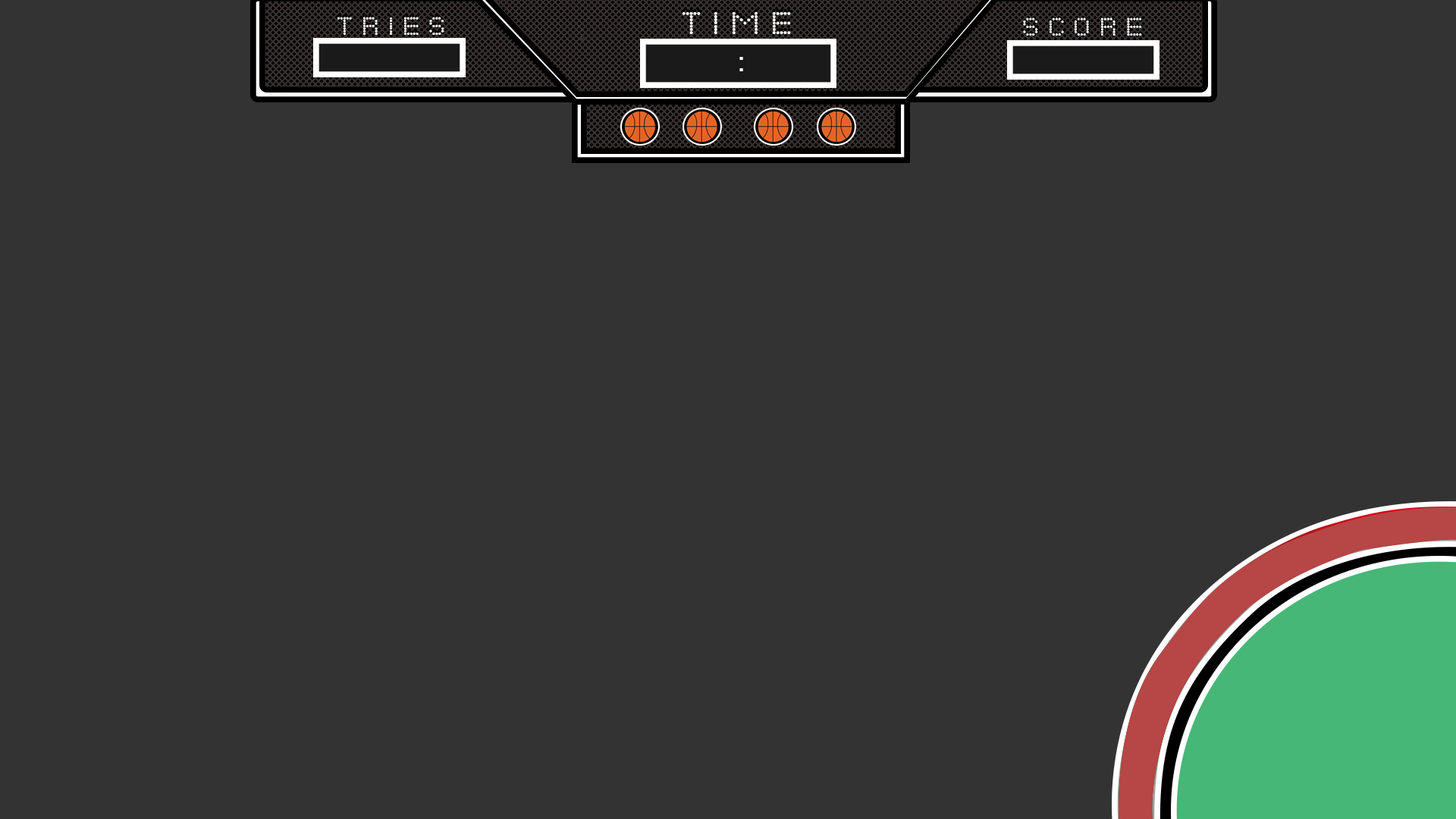
<style>
.page{position:relative;width:1456px;height:819px;background:#333333}
.page>*{position:absolute;margin:0}
.t1{font:22.7px "DotsAllForNowJL";color:#ffffff}
.t2{font:28.2px "DotsAllForNowJL"}
.t3{font:28.2px "DotsAllForNowJL";color:#ffffff}
.t4{font:28.2px "ArialNova";color:#ffffff}
</style>
<div class="page">
<p class="t1" style="left:337px;top:17px;width:107px;height:18px">T R I E S</p>
<p class="t2" style="left:682px;top:8px;width:109px;height:23px">T I M E</p>
<p class="t3" style="left:682px;top:11px;width:109px;height:23px">T I M E</p>
<p class="t1" style="left:1023px;top:17px;width:119px;height:19px">S C O R E</p>
<p class="t4" style="left:739px;top:57px;width:4px;height:14px">:</p>
</div>
